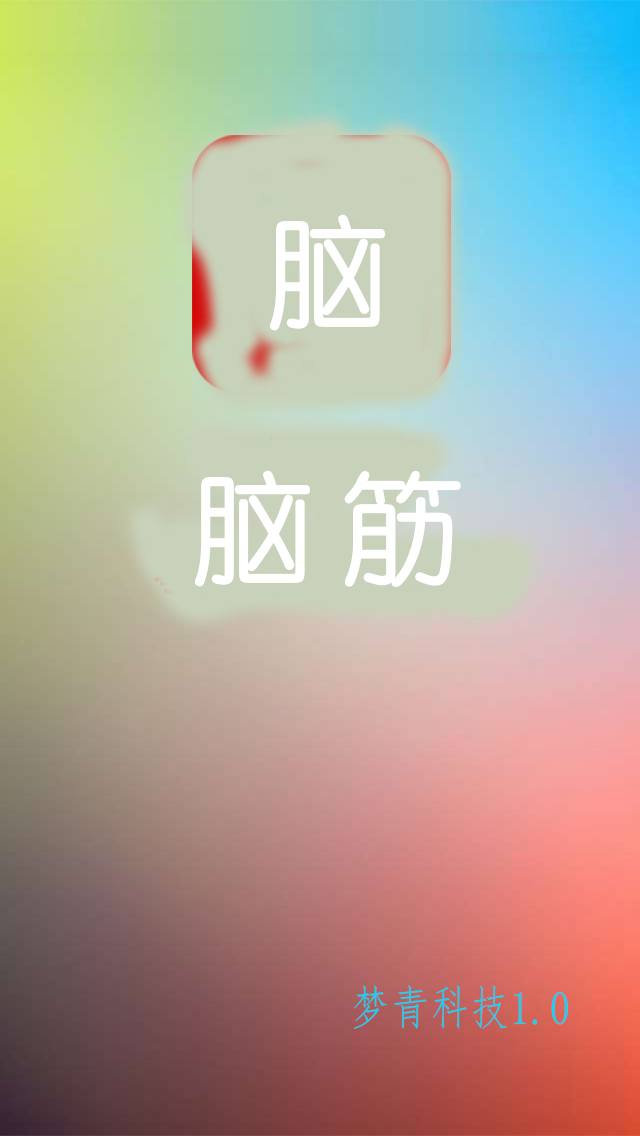
<style>
.page{position:relative;width:640px;height:1136px}
.page>*{position:absolute;margin:0}
.t1{font:120px "STYuanti-SC-Regular";color:#ffffff}
</style>
<div class="page">
<p class="t1" style="left:270px;top:214px;width:115px;height:117px">脑</p>
<p class="t1" style="left:195px;top:470px;width:266px;height:118px">脑 筋</p>
</div>
